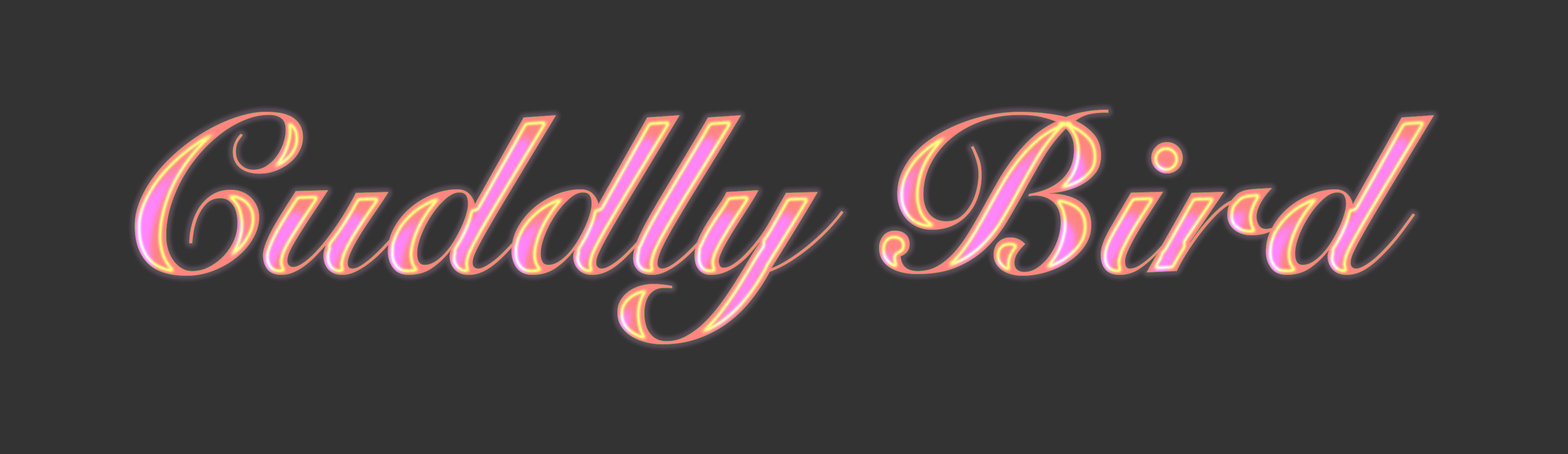
<style>
.page{position:relative;width:1568px;height:454px;background:#333333}
.page>*{position:absolute;margin:0}
.t1{font:222px "SnellRoundhand-Black"}
</style>
<div class="page">
<p class="t1" style="left:135px;top:110px;width:1299px;height:234px">Cuddly Bird</p>
</div>
